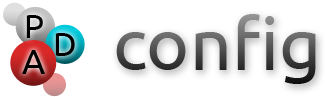
<style>
.page{position:relative;width:325px;height:97px;background:#ffffff}
.page>*{position:absolute;margin:0}
.t1{font:32.6px "Ubuntu";color:#000000}
.t2{font:73.4px "Ubuntu"}
.t3{font:34.8px "Ubuntu";color:#000000}
</style>
<div class="page">
<p class="t1" style="left:26px;top:15px;width:17px;height:23px">P</p>
<p class="t2" style="left:116px;top:14px;width:200px;height:70px">config</p>
<p class="t1" style="left:55px;top:33px;width:20px;height:23px">D</p>
<p class="t3" style="left:22px;top:50px;width:23px;height:24px">A</p>
</div>
